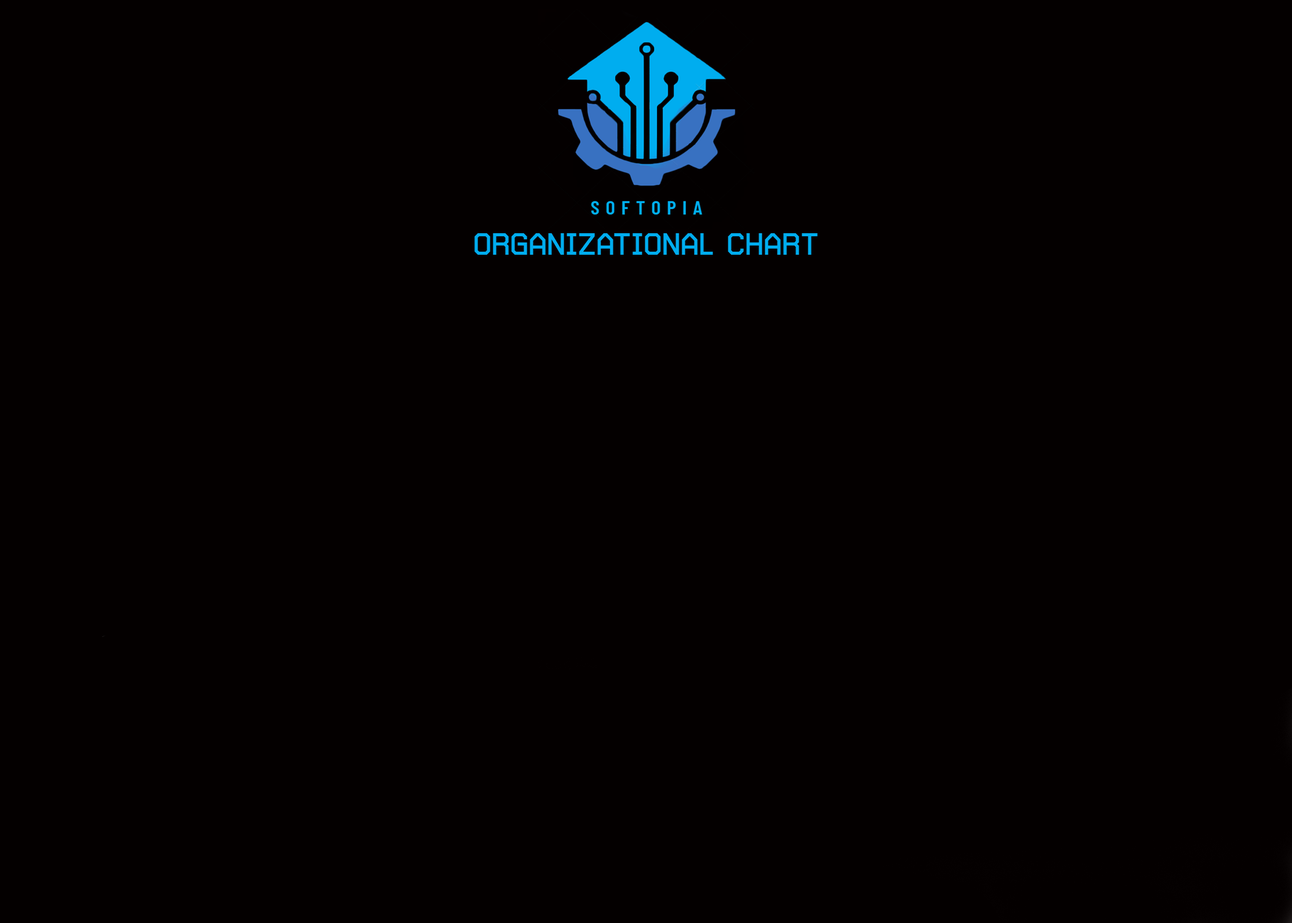
<style>
.page{position:relative;width:1292px;height:923px;background:#040000}
.page>*{position:absolute;margin:0}
.t1{font:30.8px "Autobahn";color:#00adef}
</style>
<div class="page">
<p class="t1" style="left:474px;top:233px;width:344px;height:22px">ORGANIZATIONAL CHART</p>
</div>
